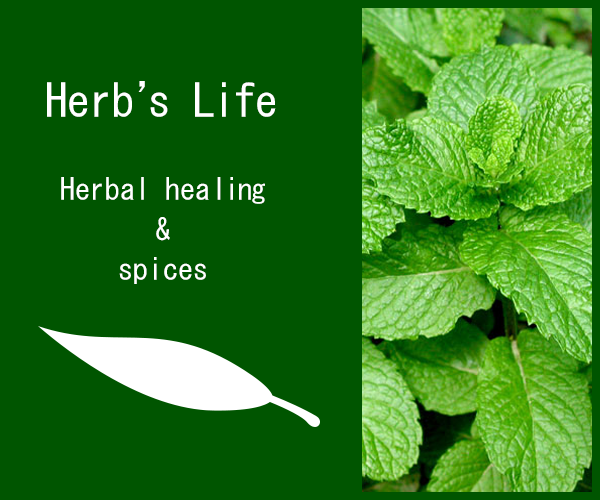
<style>
.page{position:relative;width:600px;height:500px;background:#005500}
.page>*{position:absolute;margin:0}
.t1{font:45px "MS-Gothic";color:#ffffff}
.t2{font:45px "MS-Gothic";letter-spacing:-0.72em;color:#ffffff}
.t3{font:45px "MS-Gothic";letter-spacing:-0.04em;color:#ffffff}
.t4{font:30px/40px "MS-Gothic";color:#ffffff}
.t5{font:30px/40px "MS-Gothic";letter-spacing:-0.06em;color:#ffffff}
</style>
<div class="page">
<p class="t1" style="left:47px;top:81px;width:229px;height:36px">Herb<span class="t2">’</span>s <span class="t3">Life</span></p>
<p class="t4" style="left:61px;top:177px;width:204px;height:107px;text-align:center">Herbal hea<span class="t5">ling<br></span>&amp;<br>spices</p>
</div>
